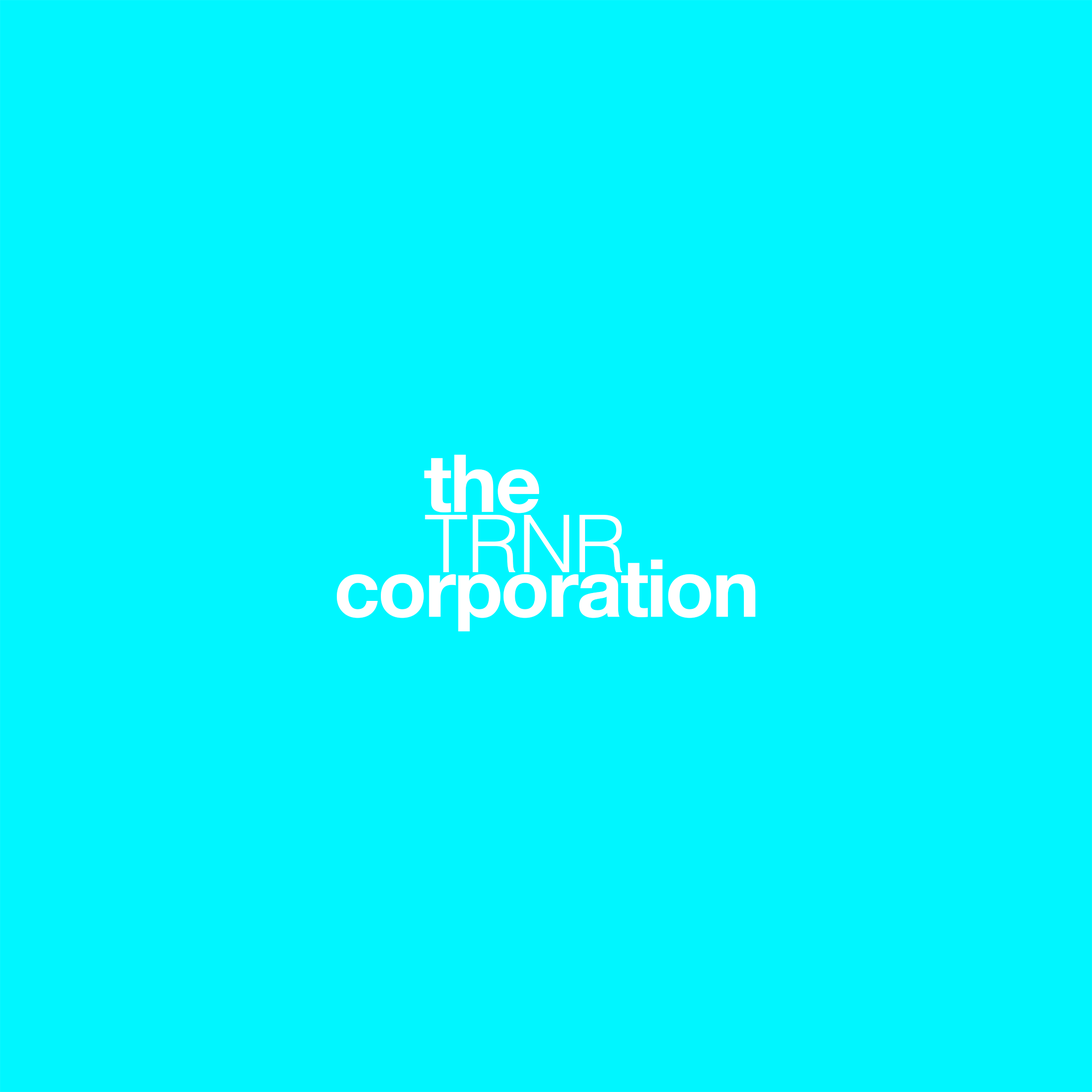
<style>
.page{position:relative;width:1092px;height:1092px;background:#00f6ff}
.page>*{position:absolute;margin:0}
.t1{font:79.9px "HelveticaNeueBold";letter-spacing:-0.025em;color:#ffffff}
.t2{font:79.9px "HelvLight-Normal";letter-spacing:-0.025em;color:#ffffff}
</style>
<div class="page">
<p class="t1" style="left:424px;top:454px;width:116px;height:59px">the</p>
<p class="t2" style="left:425px;top:515px;width:197px;height:57px">TRNR</p>
<p class="t1" style="left:337px;top:559px;width:419px;height:73px">corporation</p>
</div>
